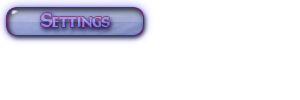
<style>
.page{position:relative;width:300px;height:100px;background:#ffffff}
.page>*{position:absolute;margin:0}
.t1{font:20px "LHFUncialCaps";color:#939be5;font-variant:small-caps}
</style>
<div class="page">
<p class="t1" style="left:41px;top:13px;width:69px;height:15px">Settings</p>
</div>
